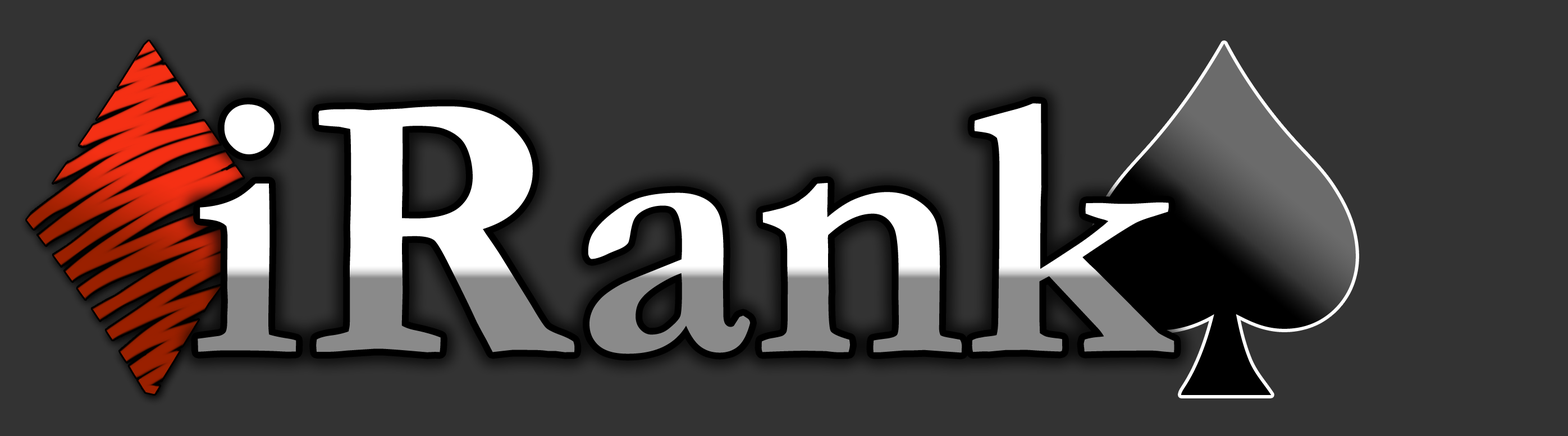
<style>
.page{position:relative;width:1568px;height:436px;background:#333333}
.page>*{position:absolute;margin:0}
.t1{font:383.7px "Garamond-Bold";letter-spacing:-0.025em;font-weight:bold}
</style>
<div class="page">
<p class="t1" style="left:198px;top:103px;width:976px;height:251px">iRank</p>
</div>
